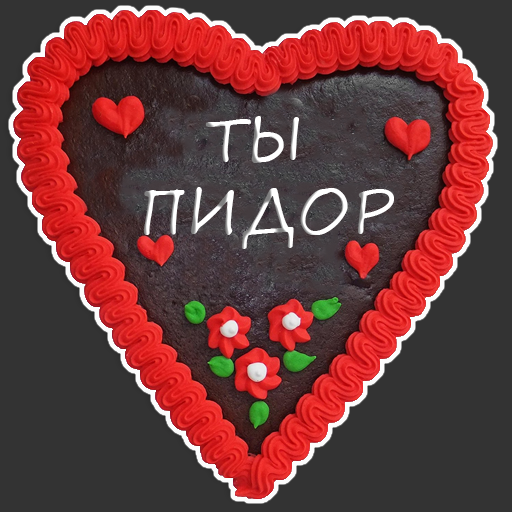
<style>
.page{position:relative;width:512px;height:512px;background:#333333}
.page>*{position:absolute;margin:0}
.t1{font:60px "SegoePrint";color:#ffffff}
</style>
<div class="page">
<p class="t1" style="left:144px;top:116px;width:250px;height:133px;text-align:center">ТЫ<br> ПИДОР</p>
</div>
